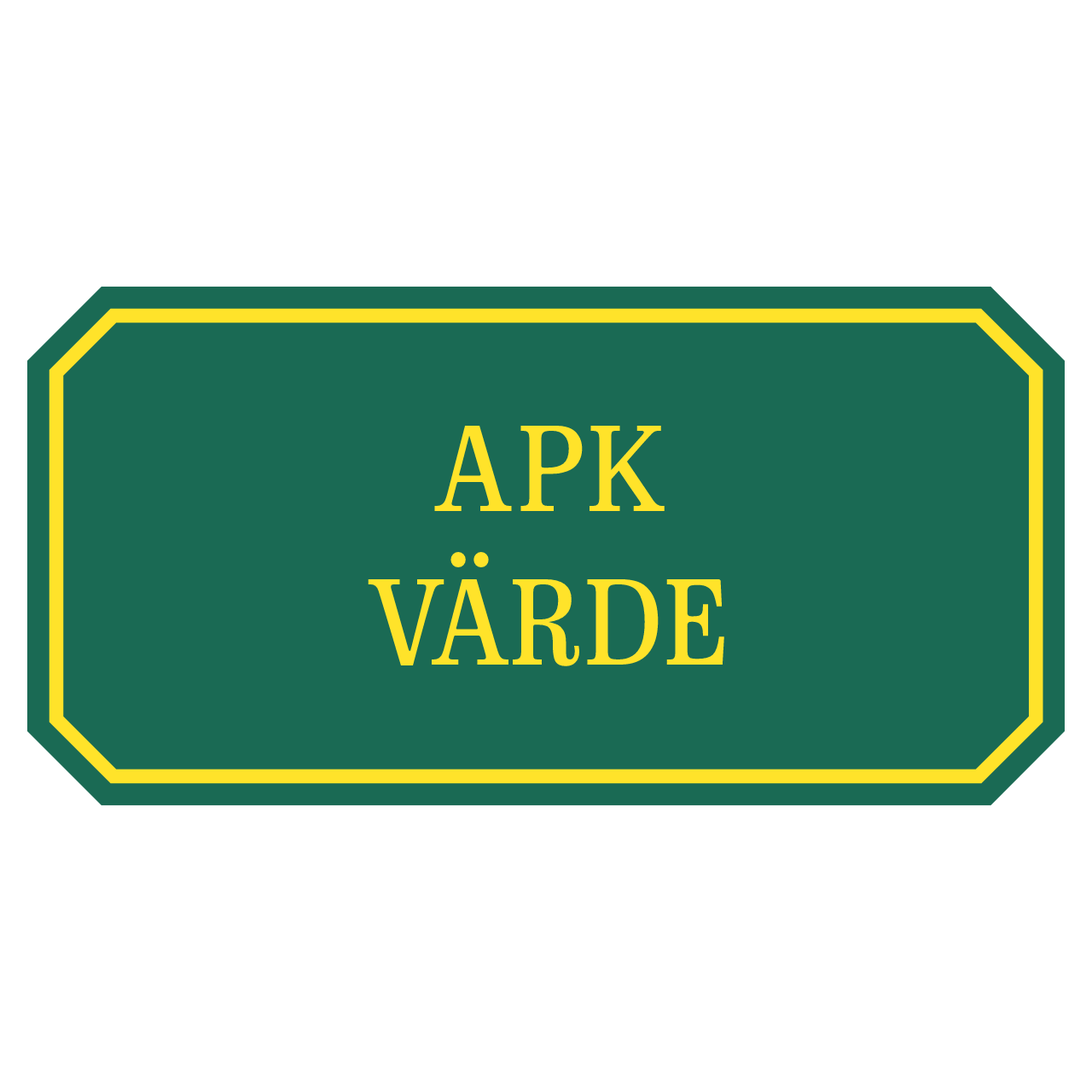
<style>
.page{position:relative;width:1092px;height:1092px;background:#ffffff}
.page>*{position:absolute;margin:0}
.t1{font:128px "MonopolWebText-Regular";color:#ffe32a}
</style>
<div class="page">
<p class="t1" style="left:368px;top:425px;width:356px;height:241px;text-align:center">APK<br>VÄRDE</p>
</div>
